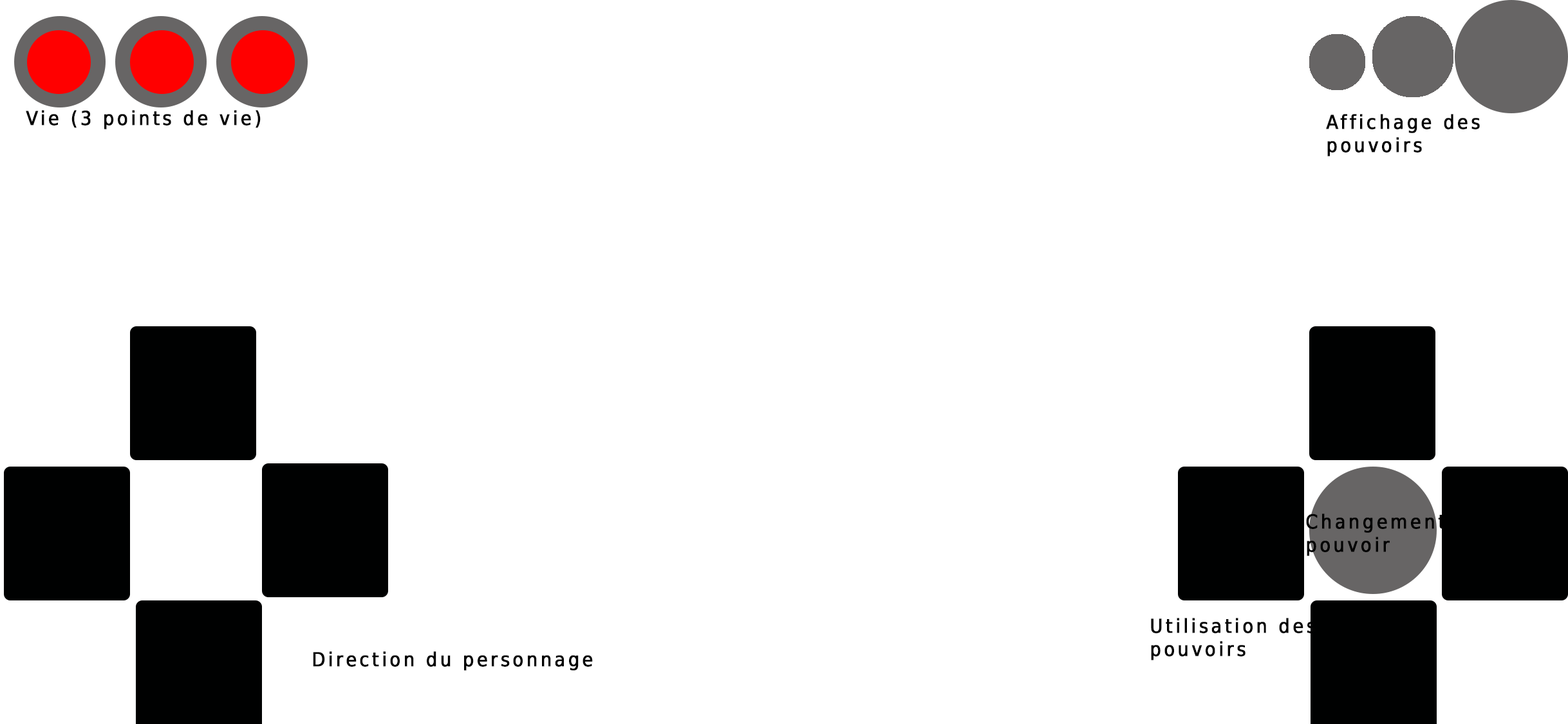
<style>
.page{position:relative;width:1568px;height:724px;background:#ffffff}
.page>*{position:absolute;margin:0}
.t1{font:19.3px "DejaVuSansCondensed";letter-spacing:0.13em;color:#020202;font-weight:bold}
.t2{font:19.3px/23.2px "DejaVuSansCondensed";letter-spacing:0.13em;color:#020202;font-weight:bold}
</style>
<div class="page">
<p class="t1" style="left:26px;top:110px;width:235px;height:19px">Vie (3 points de vie)</p>
<p class="t2" style="left:1326px;top:114px;width:154px;height:42px">Affichage des <br>pouvoirs</p>
<p class="t2" style="left:1306px;top:514px;width:139px;height:42px">Changement<br>pouvoir</p>
<p class="t2" style="left:1151px;top:618px;width:165px;height:42px">Utilisation des <br>pouvoirs</p>
<p class="t1" style="left:313px;top:651px;width:280px;height:20px">Direction du personnage</p>
</div>
